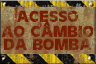
<style>
.page{position:relative;width:96px;height:64px}
.page>*{position:absolute;margin:0}
.t1{font:16px/15px "CartesDisplaySSK";color:#761c03;text-transform:uppercase;scale:1.08 1}
.t2{font:16px/13px "CartesDisplaySSK";color:#761c03;text-transform:uppercase;scale:1.08 1}
.t3{font:10.8px "Impact";color:#761c03;text-transform:uppercase;font-weight:bold;scale:1.14 1}
</style>
<div class="page">
<p class="t1" style="left:1px;top:10px;width:93px;height:40px;text-align:center">ACESSO<br>AO CAMBIO<br><span class="t2">DA BOMBA</span></p>
<p class="t3" style="left:43px;top:21px;width:7px;height:5px">^</p>
</div>
